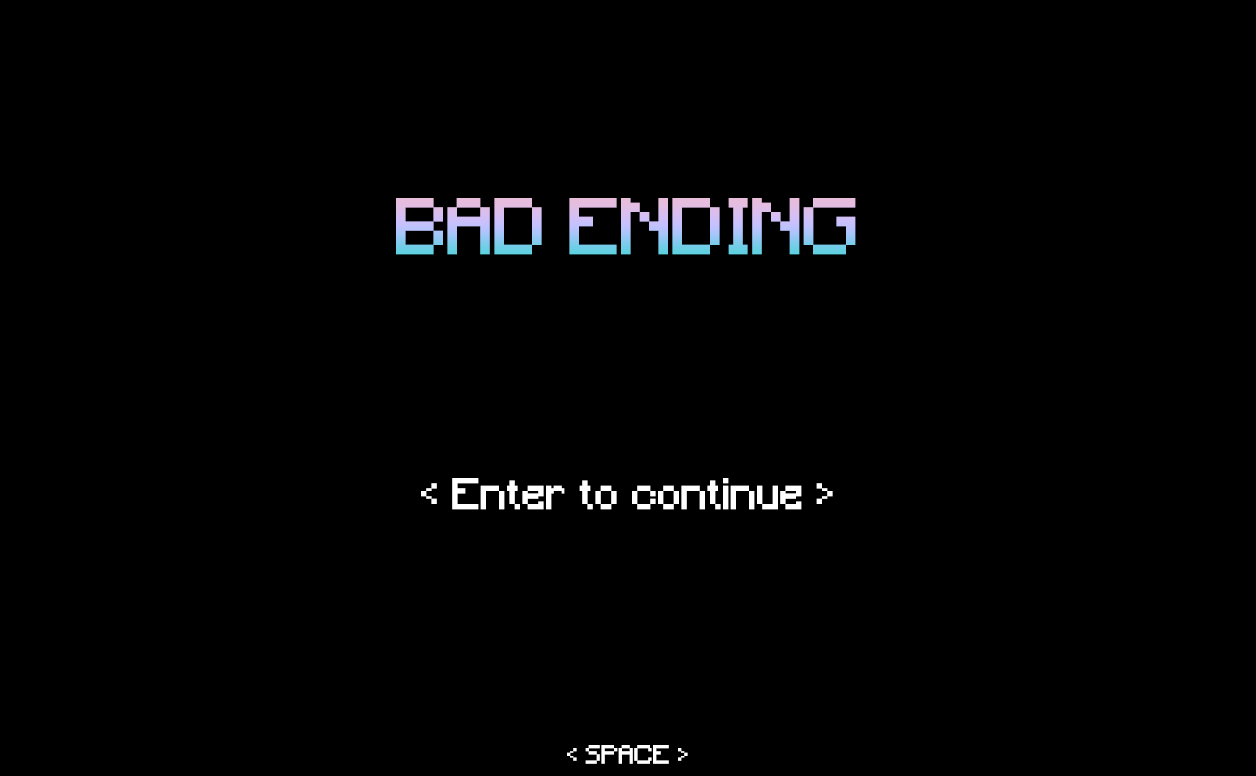
<style>
.page{position:relative;width:1256px;height:776px;background:#000000}
.page>*{position:absolute;margin:0}
.t1{font:75px "Minecraft"}
.t2{font:41.7px "Minecraft";color:#fefefe}
.t3{font:25px "Minecraft";color:#fefefe}
</style>
<div class="page">
<p class="t1" style="left:396px;top:198px;width:460px;height:57px">BAD ENDING</p>
<p class="t2" style="left:421px;top:478px;width:412px;height:32px">&lt; Enter to continue &gt;</p>
<p class="t3" style="left:567px;top:745px;width:121px;height:19px">&lt; SPACE &gt;</p>
</div>
